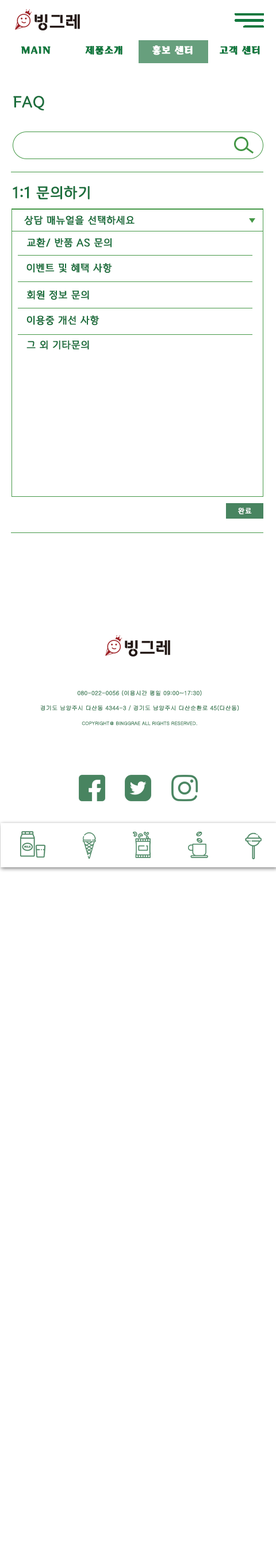
<style>
.page{position:relative;width:276px;height:1568px;background:#ffffff}
.page>*{position:absolute;margin:0}
.t1{font:9.2px "BinggraeII-Bold";letter-spacing:0.06em;color:#10783e;text-transform:uppercase;font-weight:bold}
.t2{font:9.2px "BinggraeII-Bold";letter-spacing:0.06em;color:#ffffff;text-transform:uppercase;font-weight:bold}
.t3{font:14.4px "BinggraeII";color:#1c6f3d;font-weight:bold}
.t4{font:9.8px "BinggraeII";color:#1c6f3d;font-weight:bold}
.t5{font:5.7px/7.5px "Gulim";color:#488460;text-transform:uppercase;font-weight:bold}
.t6{font:4.6px/7.5px "Gulim";color:#488460;text-transform:uppercase;font-weight:bold}
</style>
<div class="page">
<p class="t1" style="left:21px;top:46px;width:30px;height:8px">main</p>
<p class="t1" style="left:85px;top:46px;width:37px;height:9px">제품소개</p>
<p class="t2" style="left:152px;top:45px;width:40px;height:10px">홍보 센터</p>
<p class="t1" style="left:219px;top:46px;width:41px;height:9px">고객 센터</p>
<p class="t3" style="left:13px;top:95px;width:31px;height:16px">FAQ</p>
<p class="t3" style="left:13px;top:186px;width:77px;height:14px">1:1 문의하기</p>
<p class="t4" style="left:24px;top:215px;width:110px;height:10px">상담 매뉴얼을 선택하세요</p>
<p class="t4" style="left:27px;top:238px;width:84px;height:10px">교환/ 반품 AS 문의</p>
<p class="t4" style="left:26px;top:263px;width:86px;height:10px">이벤트 및 혜택 사항</p>
<p class="t4" style="left:26px;top:290px;width:63px;height:10px">회원 정보 문의</p>
<p class="t4" style="left:26px;top:315px;width:73px;height:10px">이용중 개선 사항</p>
<p class="t4" style="left:26px;top:340px;width:63px;height:10px">그 외 기타문의</p>
<p class="t5" style="left:40px;top:690px;width:199px;height:35px;text-align:center">080-022-0056 (이용시간 평일 09:00~17:30)<br><br>경기도 남양주시 다산동 4344-3 / 경기도 남양주시 다산순환로 45(다산동)<br><span class="t6"><br>copyright＠ Binggrae all rights reserved.</span></p>
</div>
